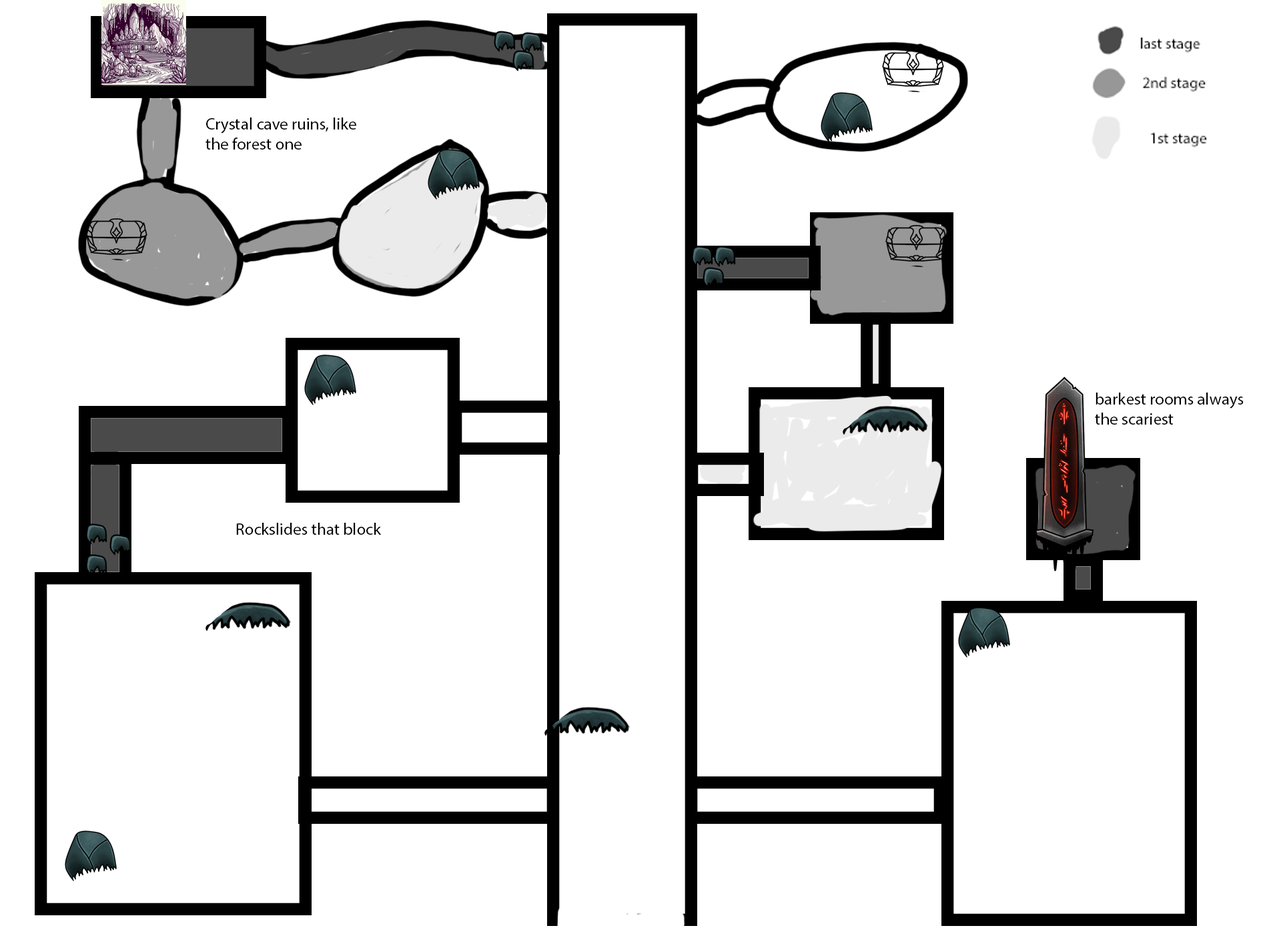
<style>
.page{position:relative;width:1261px;height:946px;background:#ffffff}
.page>*{position:absolute;margin:0}
.t1{font:16.7px "MyriadPro-Regular";color:#000000}
</style>
<div class="page">
<p class="t1" style="left:206px;top:117px;width:150px;height:32px">Crystal cave ruins, like the forest one</p>
<p class="t1" style="left:1095px;top:392px;width:149px;height:32px">barkest rooms always the scariest</p>
<p class="t1" style="left:236px;top:522px;width:146px;height:12px">Rockslides that block</p>
</div>
